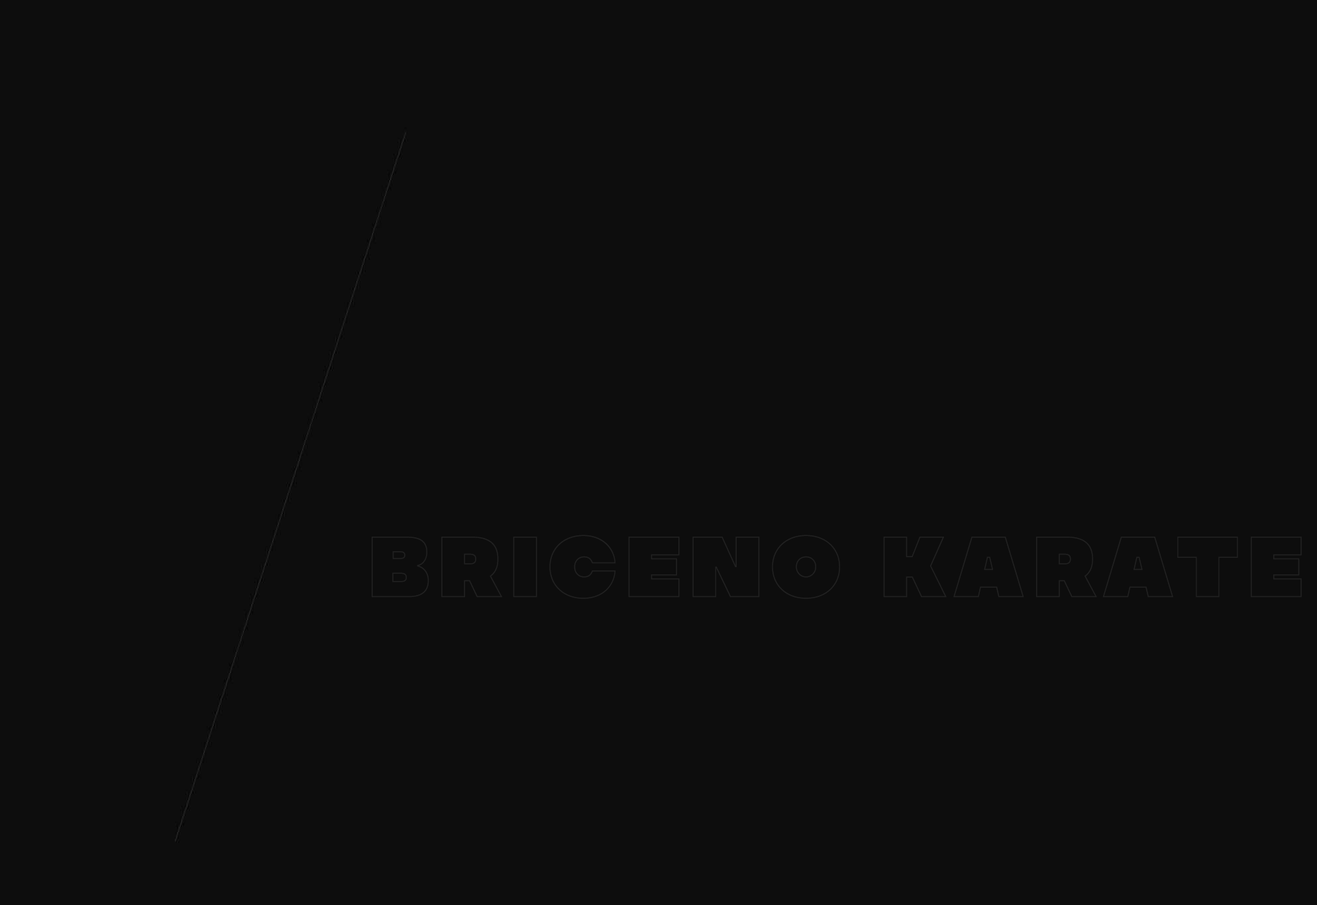
<style>
.page{position:relative;width:1317px;height:905px;background:#0d0d0d}
.page>*{position:absolute;margin:0}
.t1{font:86.1px "MADESoulmazeOutline";letter-spacing:0.075em;color:#212121}
</style>
<div class="page">
<p class="t1" style="left:372px;top:535px;width:930px;height:64px">BRICENO KARATE</p>
</div>
